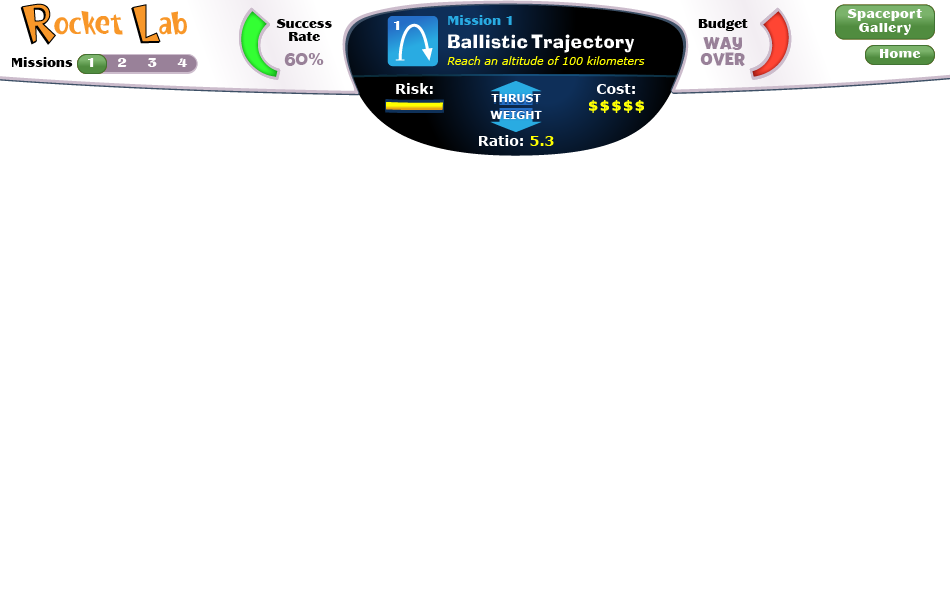
<style>
.page{position:relative;width:950px;height:600px;background:#ffffff}
.page>*{position:absolute;margin:0}
.t1{font:14px "Panache-Black-DTC";color:#29abe2}
.t2{font:14px/14px "Panache-Black-DTC";letter-spacing:0.025em;color:#ffffff}
.t3{font:14px/13px "Panache-Black-DTC";color:#000000}
.t4{font:14px "Panache-Black-DTC";color:#000000}
.t5{font:18px "Blox-Regular";letter-spacing:0.025em;color:#ffffff}
.t6{font:18px/16px "Billy-Bold";color:#998199}
.t7{font:18px "Billy-Bold";color:#998199}
.t8{font:16px "Arial-Black";color:#998199}
.t9{font:14px "Panache-Black-DTC";letter-spacing:0.025em;color:#ffffff}
.t10{font:14px "Panache-Black-DTC";color:#ffffff}
.t11{font:11px "Verdana-Italic";color:#ffff00}
.t12{font:14px "Verdana-Bold";color:#ffffff}
.t13{font:14px "Verdana-Bold";color:#ffff00}
</style>
<div class="page">
<p class="t1" style="left:448px;top:15px;width:64px;height:10px">Mission 1</p>
<p class="t2" style="left:847px;top:9px;width:75px;height:26px;text-align:center">Spaceport<br>Gallery</p>
<p class="t2" style="left:847px;top:9px;width:75px;height:26px;text-align:center">Spaceport<br>Gallery</p>
<p class="t3" style="left:276px;top:19px;width:56px;height:22px;text-align:center">Success<br>Rate</p>
<p class="t4" style="left:698px;top:19px;width:50px;height:12px">Budget</p>
<p class="t5" style="left:448px;top:34px;width:187px;height:19px">Ballistic Trajectory</p>
<p class="t6" style="left:700px;top:37px;width:45px;height:30px;text-align:center">WAY<br>OVER</p>
<p class="t7" style="left:284px;top:53px;width:40px;height:13px">60<span class="t8">%</span></p>
<p class="t9" style="left:880px;top:49px;width:41px;height:9px">Home</p>
<p class="t9" style="left:880px;top:49px;width:41px;height:9px">Home</p>
<p class="t4" style="left:12px;top:57px;width:61px;height:10px">Missions</p>
<p class="t10" style="left:88px;top:58px;width:6px;height:9px">1</p>
<p class="t10" style="left:118px;top:58px;width:9px;height:9px">2</p>
<p class="t10" style="left:147px;top:58px;width:10px;height:9px">3</p>
<p class="t10" style="left:177px;top:58px;width:11px;height:9px">4</p>
<p class="t11" style="left:447px;top:56px;width:198px;height:9px">Reach an altitude of 100 kilometers</p>
<p class="t12" style="left:396px;top:83px;width:37px;height:11px">Risk:</p>
<p class="t12" style="left:597px;top:84px;width:38px;height:10px">Cost:</p>
<p class="t12" style="left:479px;top:135px;width:44px;height:11px">Ratio:</p>
<p class="t13" style="left:530px;top:136px;width:24px;height:10px">5.3</p>
</div>
